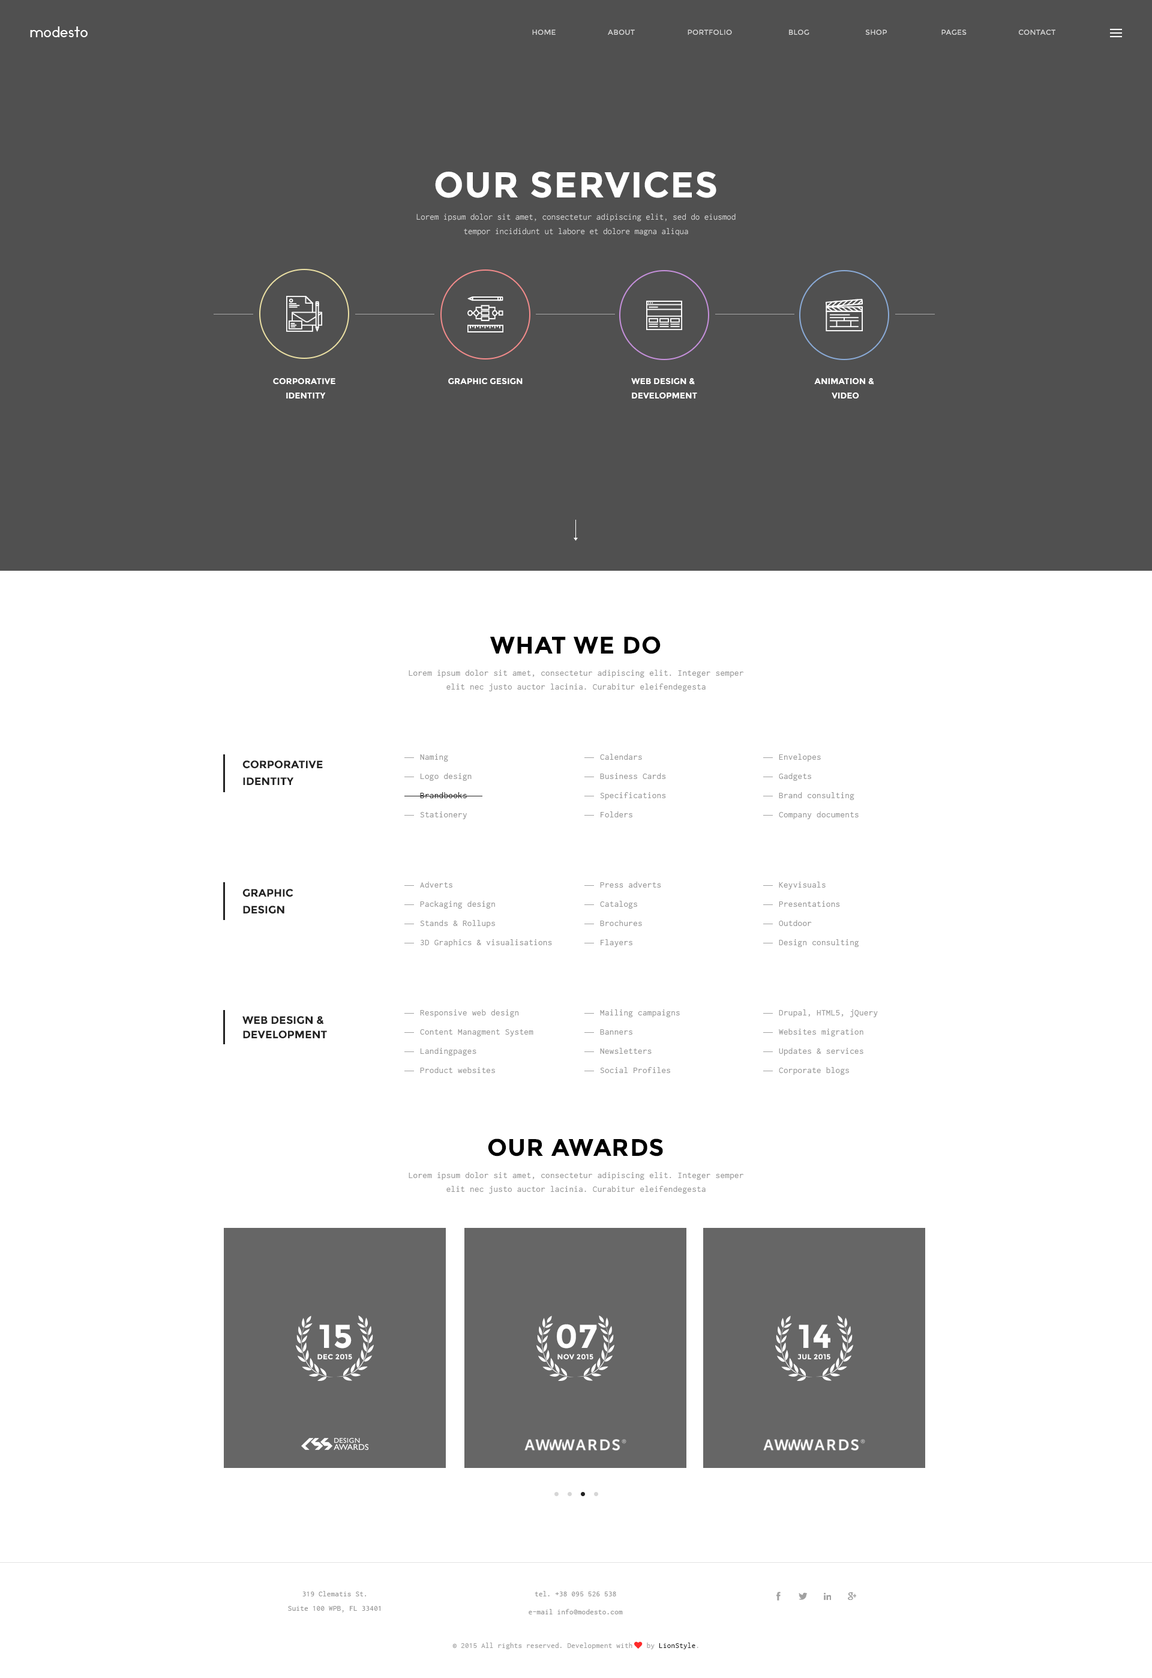
<style>
.page{position:relative;width:1152px;height:1678px;background:#ffffff}
.page>*{position:absolute;margin:0}
.t1{font:14.4px "Ikaros";letter-spacing:0.025em;color:#ffffff}
.t2{font:7.2px "Montserrat-Regular";letter-spacing:0.025em;color:#d5d5d5;text-transform:uppercase}
.t3{font:36px "Montserrat-Bold";letter-spacing:0.025em;color:#ffffff;text-transform:uppercase}
.t4{font:9px/14.4px "Inconsolata";color:#d5d5d5}
.t5{font:8.4px/14.4px "Montserrat-Bold";color:#ffffff;text-transform:uppercase}
.t6{font:8.4px "Montserrat-Bold";color:#ffffff;text-transform:uppercase}
.t7{font:24px "Montserrat-Bold";letter-spacing:0.025em;color:#000000;text-transform:uppercase}
.t8{font:9px/13.9px "Inconsolata";letter-spacing:0.025em;color:#989898}
.t9{font:10.8px/16.8px "Montserrat-Bold";color:#222222;text-transform:uppercase}
.t10{font:9px/19.2px "Inconsolata";letter-spacing:0.025em;color:#989898}
.t11{font:9px/19.2px "Inconsolata";letter-spacing:0.025em;color:#222222}
.t12{font:10.8px/14.4px "Montserrat-Bold";color:#222222;text-transform:uppercase}
.t13{font:33px "Montserrat-Bold";letter-spacing:0.025em;color:#ffffff;text-transform:uppercase}
.t14{font:7.2px "Montserrat-Bold";letter-spacing:0.025em;color:#ffffff;text-transform:uppercase}
.t15{font:7.8px/14.4px "Inconsolata";letter-spacing:0.025em;color:#989898}
.t16{font:7.8px/18px "Inconsolata";letter-spacing:0.025em;color:#989898}
.t17{font:7.8px "Inconsolata";letter-spacing:0.025em;color:#a1a1a1}
.t18{font:7.8px "FontAwesome";letter-spacing:0.025em;color:#fe2b2b}
.t19{font:7.8px "Inconsolata";letter-spacing:0.025em;color:#222222}
.t20{font:7.8px "Inconsolata";letter-spacing:0.025em;color:#b5b5b5}
</style>
<div class="page">
<p class="t1" style="left:30px;top:26px;width:58px;height:11px">modesto</p>
<p class="t2" style="left:532px;top:29px;width:523px;height:6px">home                                                             portfolio                          Blog                          shop                         pages                        contact</p>
<p class="t2" style="left:608px;top:29px;width:27px;height:6px">about</p>
<p class="t3" style="left:435px;top:172px;width:281px;height:26px">OUR SERVICES</p>
<p class="t4" style="left:416px;top:214px;width:320px;height:22px;text-align:center">Lorem ipsum dolor sit amet, consectetur adipiscing elit, sed do eiusmod tempor incididunt ut labore et dolore magna aliqua</p>
<p class="t5" style="left:273px;top:378px;width:62px;height:20px;text-align:center">Corporative <br>identity</p>
<p class="t6" style="left:448px;top:378px;width:75px;height:6px">Graphic gesign</p>
<p class="t5" style="left:631px;top:378px;width:66px;height:20px;text-align:center">Web design &amp; <br>development</p>
<p class="t5" style="left:814px;top:378px;width:60px;height:20px;text-align:center">Animation &amp; <br>video</p>
<p class="t7" style="left:490px;top:636px;width:171px;height:18px">what we do</p>
<p class="t8" style="left:409px;top:670px;width:334px;height:21px;text-align:center">Lorem ipsum dolor sit amet, consectetur adipiscing elit. Integer semper elit nec justo auctor lacinia. Curabitur eleifendegesta</p>
<p class="t9" style="left:242px;top:760px;width:81px;height:25px">Corporative <br>identity</p>
<p class="t10" style="left:420px;top:754px;width:52px;height:65px">Naming<br>Logo design<br><span class="t11">Brandbooks<br></span>Stationery<br>Company documents</p>
<p class="t10" style="left:600px;top:754px;width:66px;height:63px">Calendars<br>Business Cards<br>Specifications<br>Folders<br>Company documents</p>
<p class="t10" style="left:779px;top:754px;width:80px;height:65px">Envelopes<br>Gadgets<br>Brand consulting<br>Company documents</p>
<p class="t10" style="left:420px;top:881px;width:132px;height:66px">Adverts<br>Packaging design<br>Stands &amp; Rollups<br>3D Graphics &amp; visualisations<br>Company documents</p>
<p class="t10" style="left:600px;top:881px;width:61px;height:66px">Press adverts<br>Catalogs<br>Brochures<br>Flayers<br>Company documents</p>
<p class="t10" style="left:779px;top:881px;width:80px;height:66px">Keyvisuals<br>Presentations<br>Outdoor<br>Design consulting</p>
<p class="t9" style="left:242px;top:889px;width:51px;height:25px">GRAPHIC <br>DESIGN</p>
<p class="t10" style="left:420px;top:1009px;width:113px;height:64px">Responsive web design <br>Content Managment System <br>Landingpages<br>Product websites<br>Company documents</p>
<p class="t10" style="left:600px;top:1009px;width:80px;height:64px">Mailing campaigns<br>Banners<br>Newsletters<br>Social Profiles<br>Company documents</p>
<p class="t10" style="left:779px;top:1009px;width:99px;height:66px">Drupal, HTML5, jQuery <br>Websites migration<br>Updates &amp; services<br>Corporate blogs</p>
<p class="t12" style="left:242px;top:1016px;width:85px;height:23px">Web design &amp; <br>development</p>
<p class="t7" style="left:488px;top:1138px;width:175px;height:18px">our AWARDS</p>
<p class="t8" style="left:409px;top:1172px;width:334px;height:21px;text-align:center">Lorem ipsum dolor sit amet, consectetur adipiscing elit. Integer semper elit nec justo auctor lacinia. Curabitur eleifendegesta</p>
<p class="t13" style="left:319px;top:1324px;width:33px;height:24px">15</p>
<p class="t13" style="left:557px;top:1324px;width:40px;height:24px">07</p>
<p class="t13" style="left:799px;top:1324px;width:31px;height:24px">14</p>
<p class="t14" style="left:317px;top:1354px;width:35px;height:5px">dec 2015</p>
<p class="t14" style="left:557px;top:1354px;width:36px;height:5px">nov 2015</p>
<p class="t14" style="left:797px;top:1354px;width:33px;height:5px">jul 2015</p>
<p class="t15" style="left:288px;top:1591px;width:92px;height:21px;text-align:center">319 Clematis St.<br>Suite 100 WPB, FL 33401</p>
<p class="t16" style="left:529px;top:1591px;width:94px;height:23px;text-align:center">tel. +38 095 526 538<br>e-mail info@modesto.com</p>
<p class="t17" style="left:452px;top:1641px;width:246px;height:8px">© 2015 All rights reserved. Development with <span class="t18">♥ </span>by<span class="t19"> LionStyle</span><span class="t20">.</span></p>
</div>
